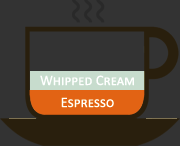
<style>
.page{position:relative;width:180px;height:146px;background:#333333}
.page>*{position:absolute;margin:0}
.t1{font:14.6px "Calibri";color:#ffffff;font-variant:small-caps}
</style>
<div class="page">
<p class="t1" style="left:40px;top:75px;width:94px;height:11px">Whipped Cream</p>
<p class="t1" style="left:61px;top:97px;width:53px;height:11px">Espresso</p>
</div>
